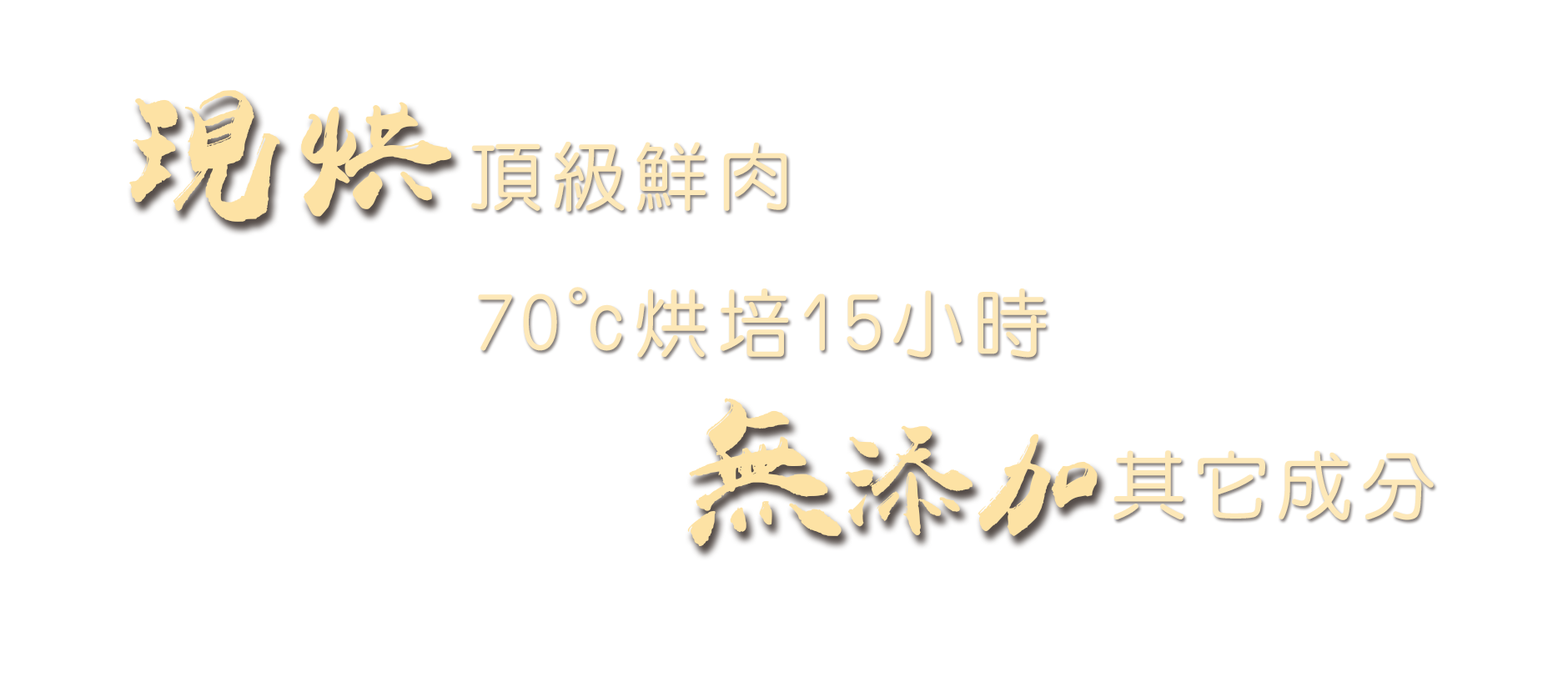
<style>
.page{position:relative;width:1568px;height:687px;background:#ffffff}
.page>*{position:absolute;margin:0}
.t1{font:183.1px "YuWeiShuFaLiShuJMFX";letter-spacing:0.1em;color:#fde2a4}
.t2{font:75.6px "DFYuan-Md-HK-BF";letter-spacing:0.1em;color:#fde2a4}
.t3{font:207.7px "YuWeiShuFaLiShuJMFX";letter-spacing:0.1em;color:#fde2a4}
.t4{font:143.6px "YuWeiShuFaLiShuJMFX";letter-spacing:0.1em;color:#fde2a4}
.t5{font:167.3px "YuWeiShuFaLiShuJMFX";letter-spacing:0.1em;color:#fde2a4}
</style>
<div class="page">
<p class="t1" style="left:129px;top:90px;width:151px;height:132px">現</p>
<p class="t1" style="left:301px;top:102px;width:151px;height:115px">烘</p>
<p class="t2" style="left:471px;top:142px;width:316px;height:70px;opacity:0.8">頂級鮮肉</p>
<p class="t2" style="left:478px;top:287px;width:108px;height:64px;opacity:0.8">70°</p>
<p class="t2" style="left:591px;top:289px;width:456px;height:69px;opacity:0.8">c烘培15小時</p>
<p class="t3" style="left:687px;top:398px;width:155px;height:148px">無</p>
<p class="t4" style="left:845px;top:425px;width:128px;height:110px">添</p>
<p class="t5" style="left:977px;top:434px;width:121px;height:102px">加</p>
<p class="t2" style="left:1113px;top:450px;width:321px;height:70px;opacity:0.8">其它成分</p>
</div>
